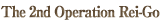
<style>
.page{position:relative;width:161px;height:26px;background:#ffffff}
.page>*{position:absolute;margin:0}
.t1{font:15px "RyuminPro-ExBold";letter-spacing:-0.08em;color:#69553d;font-weight:bold;scale:0.94 1}
</style>
<div class="page">
<p class="t1" style="left:1px;top:5px;width:159px;height:15px">The 2nd Operation Rei-Go</p>
</div>
